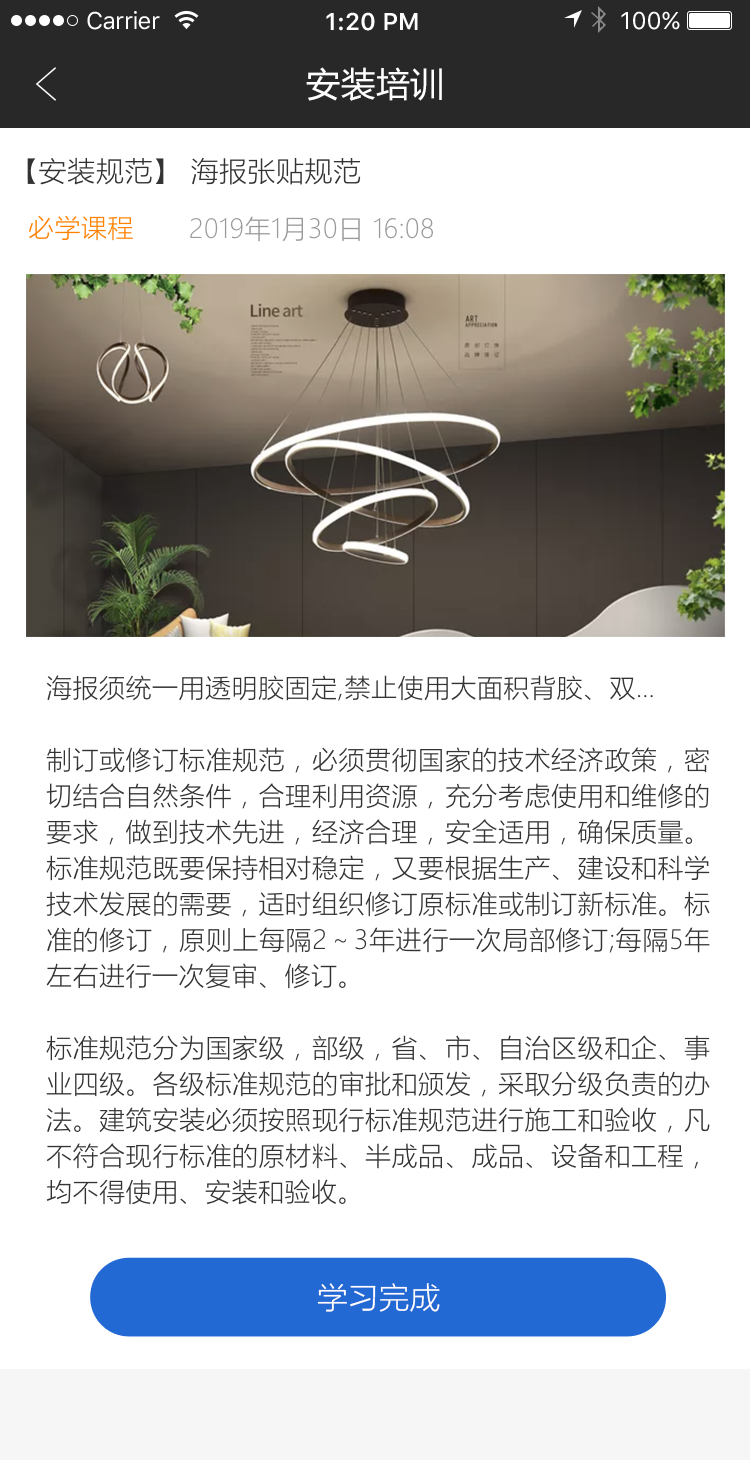
<style>
.page{position:relative;width:750px;height:1460px;background:#ffffff}
.page>*{position:absolute;margin:0}
.t1{font:24px "SFUIText-Regular";letter-spacing:-0.025em;color:#ffffff}
.t2{font:24px "SFUIText-Semibold";color:#ffffff}
.t3{font:24px "SFUIText-Regular";color:#ffffff}
.t4{font:34px "MicrosoftYaHei";letter-spacing:0.02em;color:#ffffff}
.t5{font:28px "MicrosoftYaHeiLight";letter-spacing:0.02em;color:#333333}
.t6{font:26px "MicrosoftYaHeiLight";letter-spacing:0.02em;color:#ff8100}
.t7{font:26px "MicrosoftYaHeiLight";letter-spacing:0.02em;color:#999999}
.t8{font:26px/36px "MicrosoftYaHeiLight";letter-spacing:0.02em;color:#333333}
.t9{font:30px "MicrosoftYaHeiLight";color:#ffffff}
</style>
<div class="page">
<p class="t1" style="left:87px;top:11px;width:73px;height:19px">Carrier</p>
<p class="t2" style="left:326px;top:12px;width:92px;height:19px">1:20 PM</p>
<p class="t3" style="left:621px;top:11px;width:59px;height:19px">100%</p>
<p class="t4" style="left:306px;top:67px;width:136px;height:34px">安装培训</p>
<p class="t5" style="left:27px;top:157px;width:334px;height:28px">【安装规范】 海报张贴规范</p>
<p class="t6" style="left:28px;top:215px;width:105px;height:26px">必学课程</p>
<p class="t7" style="left:190px;top:216px;width:243px;height:26px">2019年1月30日 16:08</p>
<p class="t8" style="left:46px;top:675px;width:664px;height:530px;text-align:justify">海报须统一用透明胶固定,禁止使用大面积背胶、双…<br><br>制订或修订标准规范，必须贯彻国家的技术经济政策，密切结合自然条件，合理利用资源，充分考虑使用和维修的要求，做到技术先进，经济合理，安全适用，确保质量。标准规范既要保持相对稳定，又要根据生产、建设和科学技术发展的需要，适时组织修订原标准或制订新标准。标准的修订，原则上每隔2～3年进行一次局部修订;每隔5年左右进行一次复审、修订。<br><br>标准规范分为国家级，部级，省、市、自治区级和企、事业四级。各级标准规范的审批和颁发，采取分级负责的办法。建筑安装必须按照现行标准规范进行施工和验收，凡不符合现行标准的原材料、半成品、成品、设备和工程，均不得使用、安装和验收。</p>
<p class="t9" style="left:317px;top:1283px;width:123px;height:29px">学习完成</p>
</div>
